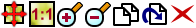
<style>
.page{position:relative;width:196px;height:28px;background:#ffffff}
.page>*{position:absolute;margin:0}
.t1{font:16px "Arial-BoldMT";color:#a3021f}
</style>
<div class="page">
<p class="t1" style="left:32px;top:8px;width:20px;height:12px">1:1</p>
</div>
